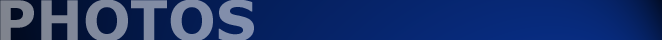
<style>
.page{position:relative;width:662px;height:40px}
.page>*{position:absolute;margin:0}
.t1{font:56px "Verdana-Bold";letter-spacing:-0.005em;color:#818ba0}
</style>
<div class="page">
<p class="t1" style="left:0px;top:0px;width:254px;height:42px">PHOTOS</p>
</div>
